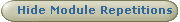
<style>
.page{position:relative;width:180px;height:22px}
.page>*{position:absolute;margin:0}
.t1{font:11px "Verdana-Bold";color:#336699}
</style>
<div class="page">
<p class="t1" style="left:18px;top:5px;width:154px;height:11px">Hide Module Repetitions</p>
</div>
